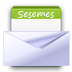
<style>
.page{position:relative;width:72px;height:72px}
.page>*{position:absolute;margin:0}
.t1{font:8.9px "SegoePrint";color:#f5f5f5}
</style>
<div class="page">
<p class="t1" style="left:18px;top:11px;width:36px;height:7px">Sesemes</p>
</div>
